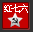
<style>
.page{position:relative;width:33px;height:32px;background:#c50000}
.page>*{position:absolute;margin:0}
.t1{font:10.4px "SimSun";letter-spacing:-0.25em;color:#ffffff}
</style>
<div class="page">
<p class="t1" style="left:4px;top:4px;width:24px;height:9px">红七六</p>
</div>
